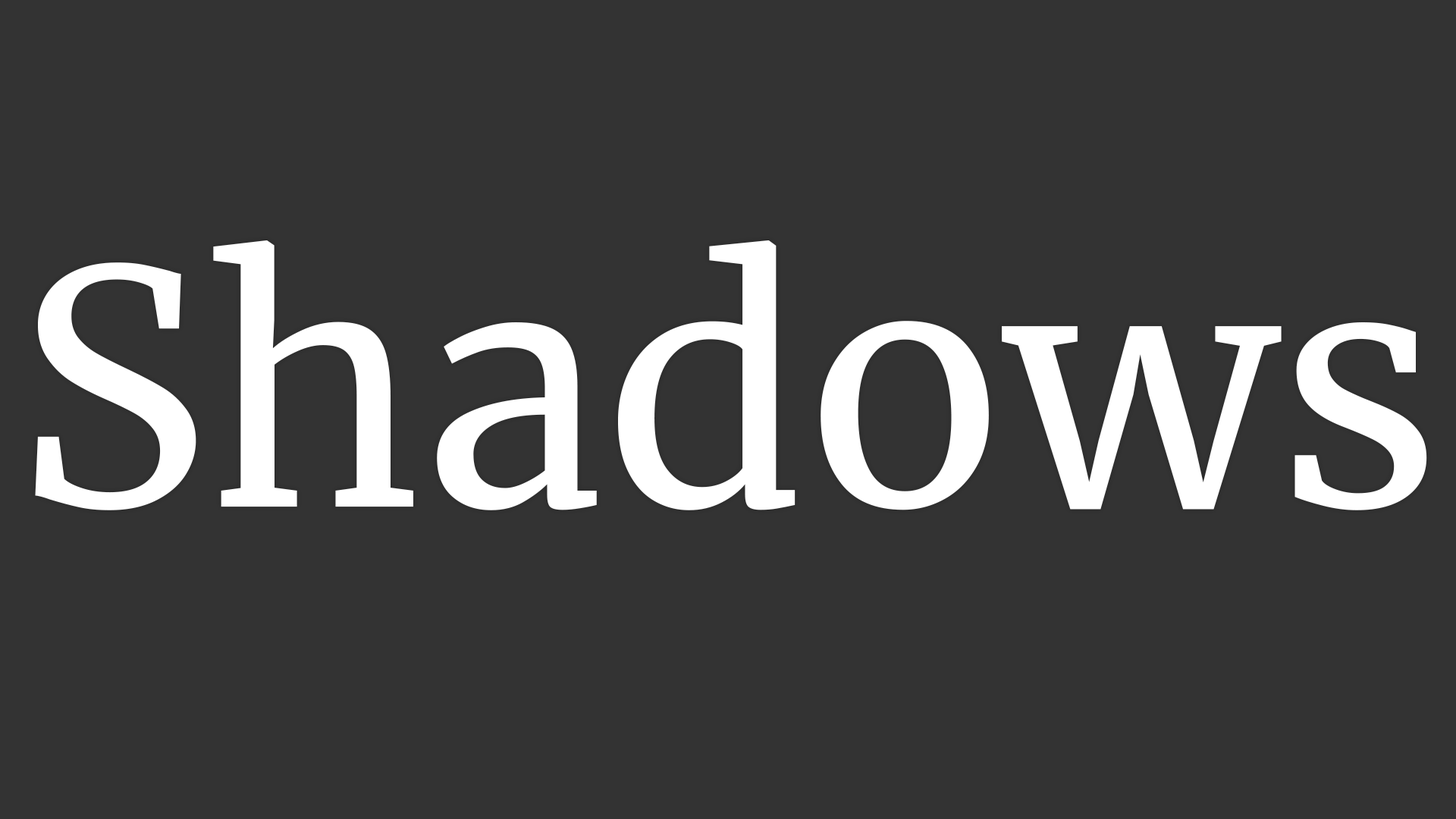
<style>
.page{position:relative;width:1456px;height:819px;background:#333333}
.page>*{position:absolute;margin:0}
.t1{font:324.9px "Merriweather-Regular";color:#ffffff}
</style>
<div class="page">
<p class="t1" style="left:35px;top:240px;width:1392px;height:270px">Shadows</p>
</div>
